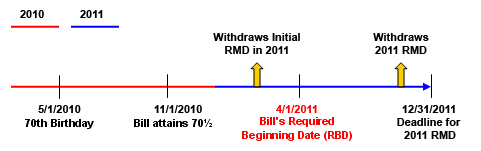
<style>
.page{position:relative;width:481px;height:151px;background:#ffffff}
.page>*{position:absolute;margin:0}
.t1{font:11px "Arial-BoldMT";color:#000000}
.t2{font:11px "Arial-BoldMT";color:#fe0000}
</style>
<div class="page">
<p class="t1" style="left:20px;top:10px;width:24px;height:8px">2010</p>
<p class="t1" style="left:80px;top:10px;width:23px;height:8px">2011</p>
<p class="t1" style="left:213px;top:33px;width:87px;height:21px;text-align:center">Withdraws Initial<br>RMD in 2011</p>
<p class="t1" style="left:373px;top:33px;width:56px;height:21px;text-align:center">Withdraws<br>2011 RMD</p>
<p class="t1" style="left:38px;top:105px;width:43px;height:8px">5/1/2010</p>
<p class="t1" style="left:154px;top:105px;width:48px;height:8px">11/1/2010</p>
<p class="t2" style="left:276px;top:105px;width:41px;height:8px">4/1/2011</p>
<p class="t1" style="left:402px;top:105px;width:53px;height:8px">12/31/2011</p>
<p class="t1" style="left:397px;top:118px;width:64px;height:21px;text-align:center">Deadline for <br>2011 RMD</p>
</div>
